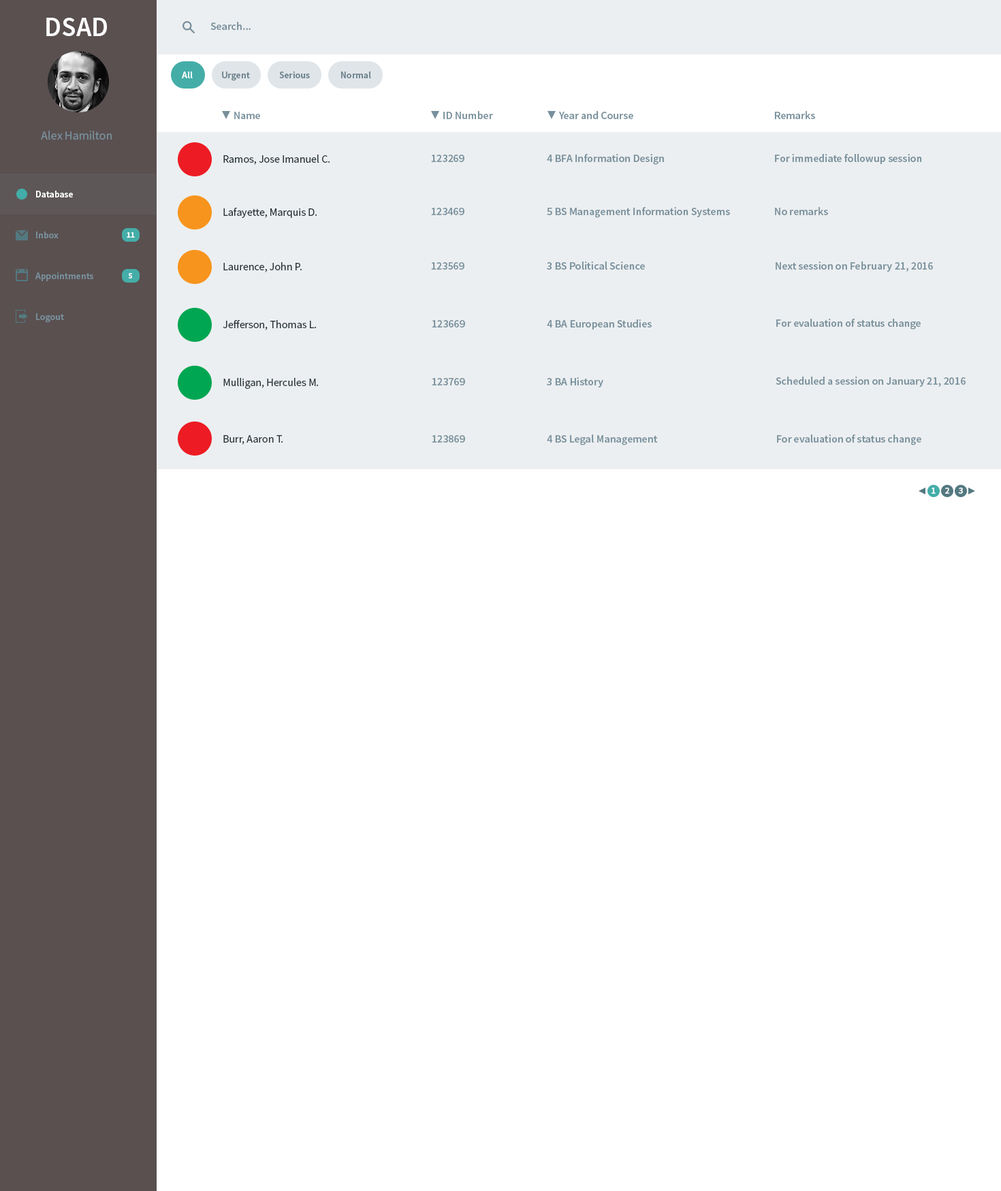
<style>
.page{position:relative;width:1001px;height:1191px;background:#ffffff}
.page>*{position:absolute;margin:0}
.t1{font:27.2px "SourceSansPro-Semibold";color:#ffffff}
.t2{font:10.9px "SourceSansPro-Semibold";color:#78909c}
.t3{font:9.5px "SourceSansPro-Semibold";color:#ffffff}
.t4{font:9.5px "SourceSansPro-Semibold";color:#6b818c}
.t5{font:10.7px "SourceSansPro-Semibold";color:#78909c}
.t6{font:12.3px "SourceSansPro-Regular";color:#78909c}
.t7{font:10.9px "SourceSansPro-Regular";color:#263238}
.t8{font:9.5px "SourceSansPro-Semibold";color:#78909c}
.t9{font:8.2px "SourceSansPro-Bold";color:#f8fafb}
</style>
<div class="page">
<p class="t1" style="left:46px;top:18px;width:61px;height:18px">DSAD</p>
<p class="t2" style="left:210px;top:22px;width:41px;height:8px">Search...</p>
<p class="t3" style="left:182px;top:72px;width:11px;height:6px">All</p>
<p class="t4" style="left:222px;top:72px;width:28px;height:9px">Urgent</p>
<p class="t4" style="left:279px;top:72px;width:31px;height:6px">Serious</p>
<p class="t4" style="left:341px;top:72px;width:30px;height:6px">Normal</p>
<p class="t5" style="left:234px;top:112px;width:26px;height:7px">Name</p>
<p class="t5" style="left:443px;top:111px;width:50px;height:8px">ID Number</p>
<p class="t5" style="left:558px;top:111px;width:75px;height:8px">Year and Course</p>
<p class="t5" style="left:774px;top:111px;width:41px;height:8px">Remarks</p>
<p class="t6" style="left:41px;top:131px;width:71px;height:9px">Alex Hamilton</p>
<p class="t7" style="left:223px;top:155px;width:107px;height:10px">Ramos, Jose Imanuel C.</p>
<p class="t2" style="left:431px;top:155px;width:33px;height:7px">123269</p>
<p class="t2" style="left:547px;top:154px;width:117px;height:11px">4 BFA Information Design</p>
<p class="t2" style="left:775px;top:154px;width:147px;height:10px">For immediate followup session</p>
<p class="t3" style="left:36px;top:191px;width:37px;height:6px">Database</p>
<p class="t7" style="left:223px;top:208px;width:94px;height:10px">Lafayette, Marquis D.</p>
<p class="t2" style="left:431px;top:208px;width:33px;height:7px">123469</p>
<p class="t2" style="left:547px;top:207px;width:183px;height:11px">5 BS Management Information Systems</p>
<p class="t2" style="left:775px;top:207px;width:53px;height:8px">No remarks</p>
<p class="t8" style="left:36px;top:232px;width:23px;height:6px">Inbox</p>
<p class="t9" style="left:127px;top:232px;width:8px;height:6px">11</p>
<p class="t7" style="left:223px;top:262px;width:79px;height:10px">Laurence, John P.</p>
<p class="t2" style="left:431px;top:262px;width:33px;height:8px">123569</p>
<p class="t2" style="left:547px;top:262px;width:98px;height:8px">3 BS Political Science</p>
<p class="t2" style="left:776px;top:262px;width:157px;height:10px">Next session on February 21, 2016</p>
<p class="t8" style="left:35px;top:272px;width:58px;height:9px">Appointments</p>
<p class="t9" style="left:128px;top:273px;width:4px;height:6px">5</p>
<p class="t8" style="left:36px;top:313px;width:28px;height:10px">Logout</p>
<p class="t7" style="left:223px;top:320px;width:94px;height:10px">Jefferson, Thomas L.</p>
<p class="t2" style="left:432px;top:320px;width:33px;height:8px">123669</p>
<p class="t2" style="left:547px;top:319px;width:105px;height:11px">4 BA European Studies</p>
<p class="t2" style="left:776px;top:319px;width:145px;height:11px">For evaluation of status change</p>
<p class="t7" style="left:223px;top:378px;width:96px;height:11px">Mulligan, Hercules M.</p>
<p class="t2" style="left:432px;top:378px;width:33px;height:7px">123769</p>
<p class="t2" style="left:547px;top:377px;width:56px;height:11px">3 BA History</p>
<p class="t2" style="left:776px;top:377px;width:190px;height:10px">Scheduled a session on January 21, 2016</p>
<p class="t7" style="left:223px;top:435px;width:60px;height:10px">Burr, Aaron T.</p>
<p class="t2" style="left:432px;top:435px;width:33px;height:8px">123869</p>
<p class="t2" style="left:547px;top:434px;width:111px;height:11px">4 BS Legal Management</p>
<p class="t2" style="left:777px;top:434px;width:144px;height:11px">For evaluation of status change</p>
<p class="t3" style="left:932px;top:488px;width:4px;height:6px">1</p>
<p class="t3" style="left:945px;top:488px;width:5px;height:6px">2</p>
<p class="t3" style="left:958px;top:488px;width:5px;height:6px">3</p>
</div>
